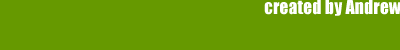
<style>
.page{position:relative;width:400px;height:50px;background:#669900}
.page>*{position:absolute;margin:0}
.t1{font:18px "Impact";color:#ffffff}
</style>
<div class="page">
<p class="t1" style="left:264px;top:0px;width:137px;height:16px">created by Andrew</p>
</div>
